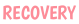
<style>
.page{position:relative;width:79px;height:24px;background:#ffffff}
.page>*{position:absolute;margin:0}
.t1{font:19px "Boogaloo-Regular";color:#fd8c98}
</style>
<div class="page">
<p class="t1" style="left:3px;top:5px;width:74px;height:15px">RECOVERY</p>
</div>
